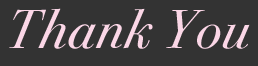
<style>
.page{position:relative;width:258px;height:66px;background:#333333}
.page>*{position:absolute;margin:0}
.t1{font:55px "BodoniSvtyTwoITCTTBookIta";letter-spacing:0.025em;color:#fbd7e7}
</style>
<div class="page">
<p class="t1" style="left:9px;top:8px;width:241px;height:41px">Thank You</p>
</div>
